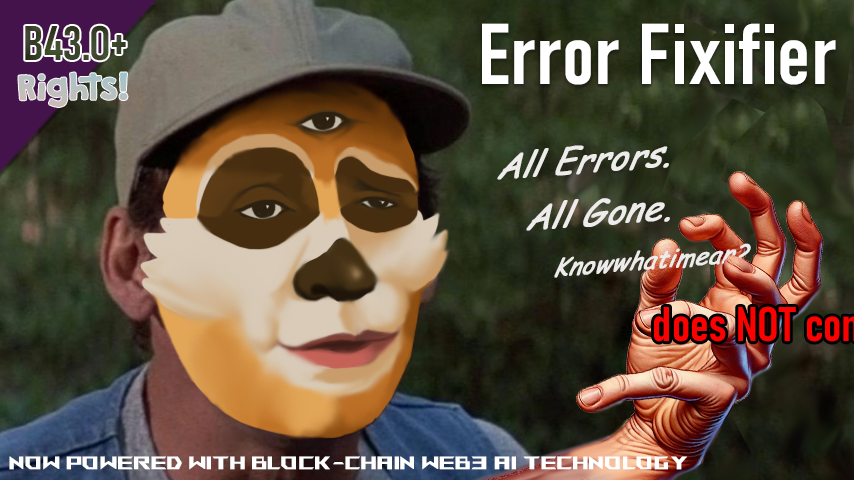
<style>
.page{position:relative;width:854px;height:480px}
.page>*{position:absolute;margin:0}
.t1{font:48px "Bahnschrift-SemiBoldCondensed";color:#3b432a;font-weight:bold}
.t2{font:85px "Bahnschrift-SemiBoldCondensed";color:#ffffff;font-weight:bold}
.t3{font:30px "GranstanderClean";color:#b9c1c0;font-weight:bold}
.t4{font:36px/56.6px "ComicSansMS-Italic";color:#ffffff;font-weight:bold;scale:0.94 1}
.t5{font:25.5px/50.9px "ComicSansMS-Italic";color:#ffffff;font-weight:bold;scale:0.94 1}
.t6{font:18px "AniMeMatrix-MB_EN";color:#ffffff;font-weight:bold}
</style>
<div class="page">
<p class="t1" style="left:25px;top:25px;width:101px;height:36px">B43.O+</p>
<p class="t2" style="left:482px;top:23px;width:354px;height:62px">Error Fixifier</p>
<p class="t3" style="left:18px;top:72px;width:110px;height:35px">Rights!</p>
<p class="t4" style="left:497px;top:145px;width:254px;height:133px;rotate:-4deg">All Errors.<br>    All Gone.<br><span class="t5">           Knowwhatimean?</span></p>
<p class="t6" style="left:9px;top:456px;width:678px;height:14px">Now powered with block-chain WEB3 AI technology</p>
</div>
